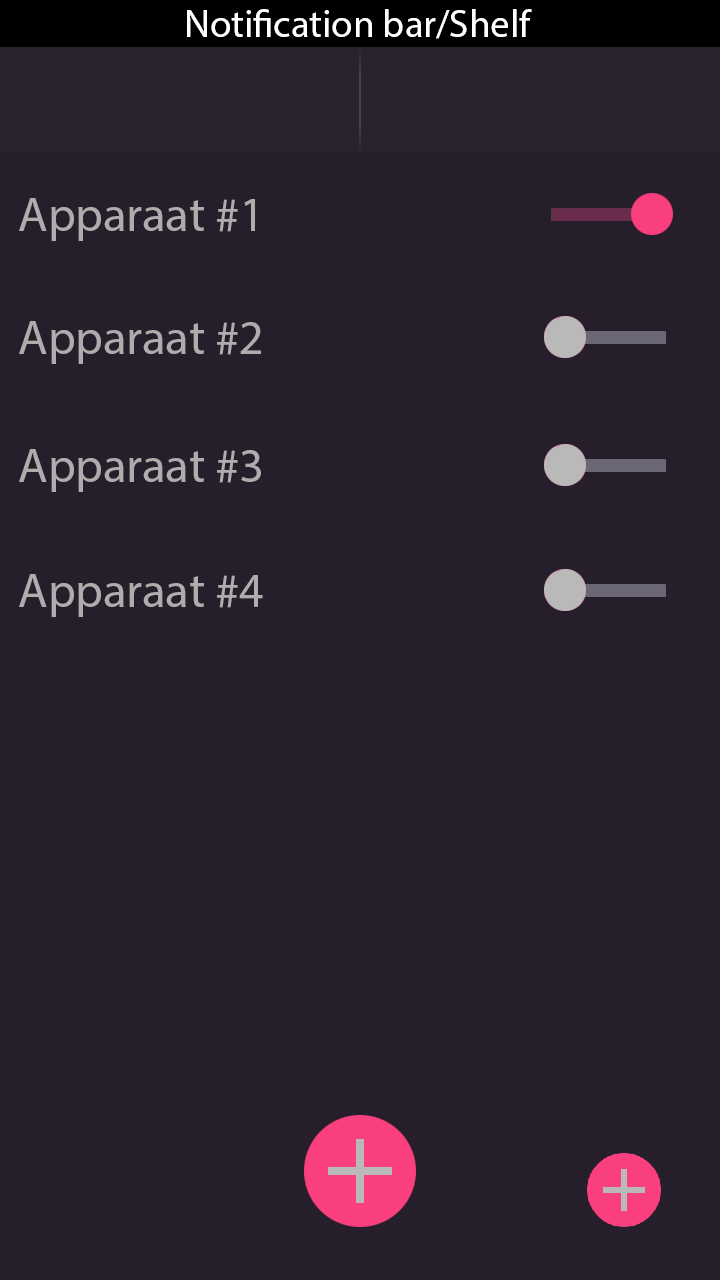
<style>
.page{position:relative;width:720px;height:1280px;background:#261e2a}
.page>*{position:absolute;margin:0}
.t1{font:48.6px "MyriadHebrew-Regular";color:#adadad}
</style>
<div class="page">
<p class="t1" style="left:19px;top:198px;width:236px;height:43px">Apparaat #1</p>
<p class="t1" style="left:19px;top:321px;width:242px;height:43px">Apparaat #2</p>
<p class="t1" style="left:19px;top:449px;width:242px;height:43px">Apparaat #3</p>
<p class="t1" style="left:19px;top:574px;width:244px;height:43px">Apparaat #4</p>
</div>
